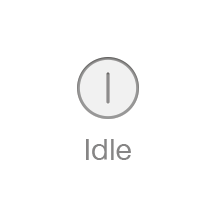
<style>
.page{position:relative;width:213px;height:213px;background:#ffffff}
.page>*{position:absolute;margin:0}
.t1{font:30px "HelveticaNeue";color:#868585}
</style>
<div class="page">
<p class="t1" style="left:86px;top:139px;width:45px;height:21px">Idle</p>
</div>
